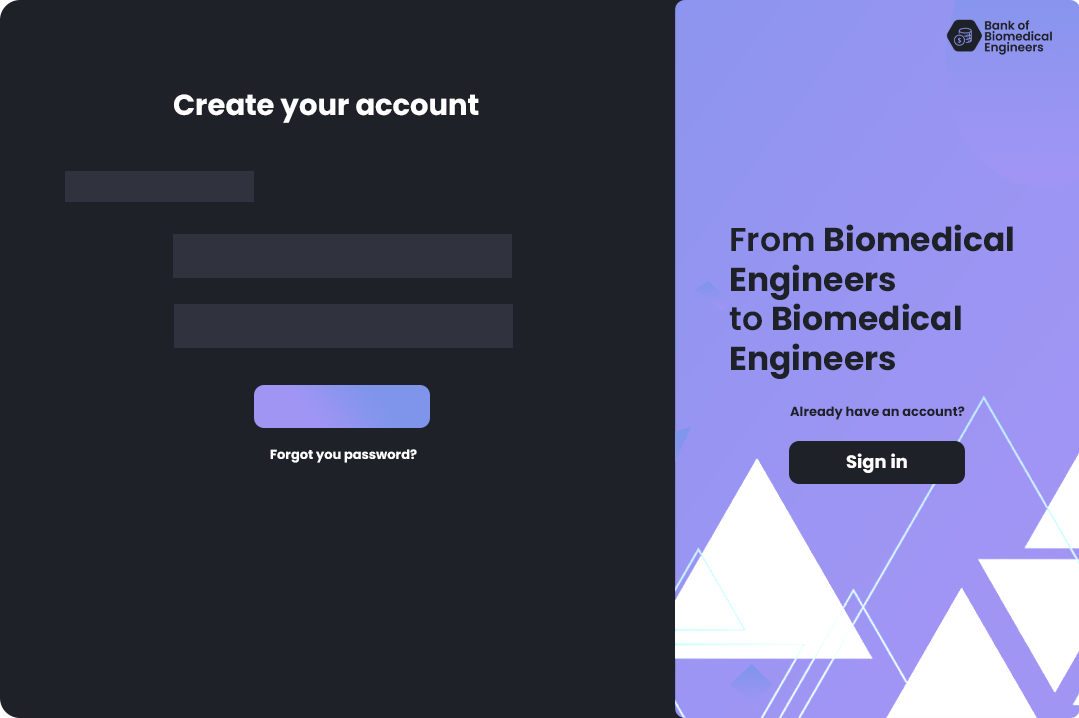
<style>
.page{position:relative;width:1079px;height:718px;background:#1f2128}
.page>*{position:absolute;margin:0}
.t1{font:29px "Poppins-Bold";color:#ffffff}
.t2{font:33px "Poppins-Bold";color:#1f2128}
.t3{font:33px "Poppins-SemiBold";color:#1f2128}
.t4{font:13px "Poppins-Bold";color:#1f2128}
.t5{font:13px "Poppins-Bold";color:#ffffff}
.t6{font:18px "Poppins-Bold";color:#ffffff}
</style>
<div class="page">
<p class="t1" style="left:174px;top:94px;width:305px;height:29px">Create your account</p>
<p class="t2" style="left:729px;top:224px;width:284px;height:155px"><span class="t3">From </span>Biomedical<br>Engineers<br><span class="t3">to </span>Biomedical<br>Engineers</p>
<p class="t4" style="left:790px;top:406px;width:175px;height:14px">Already have an account?</p>
<p class="t5" style="left:270px;top:449px;width:147px;height:14px">Forgot you password?</p>
<p class="t6" style="left:846px;top:453px;width:61px;height:20px">Sign in</p>
</div>
